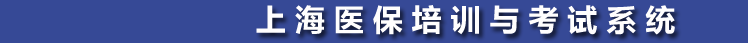
<style>
.page{position:relative;width:748px;height:43px;background:#364996}
.page>*{position:absolute;margin:0}
.t1{font:30px "MicrosoftYaHei";color:#fffefe}
</style>
<div class="page">
<p class="t1" style="left:256px;top:5px;width:419px;height:30px">上 海 医 保 培 训 与 考 试 系 统</p>
</div>
